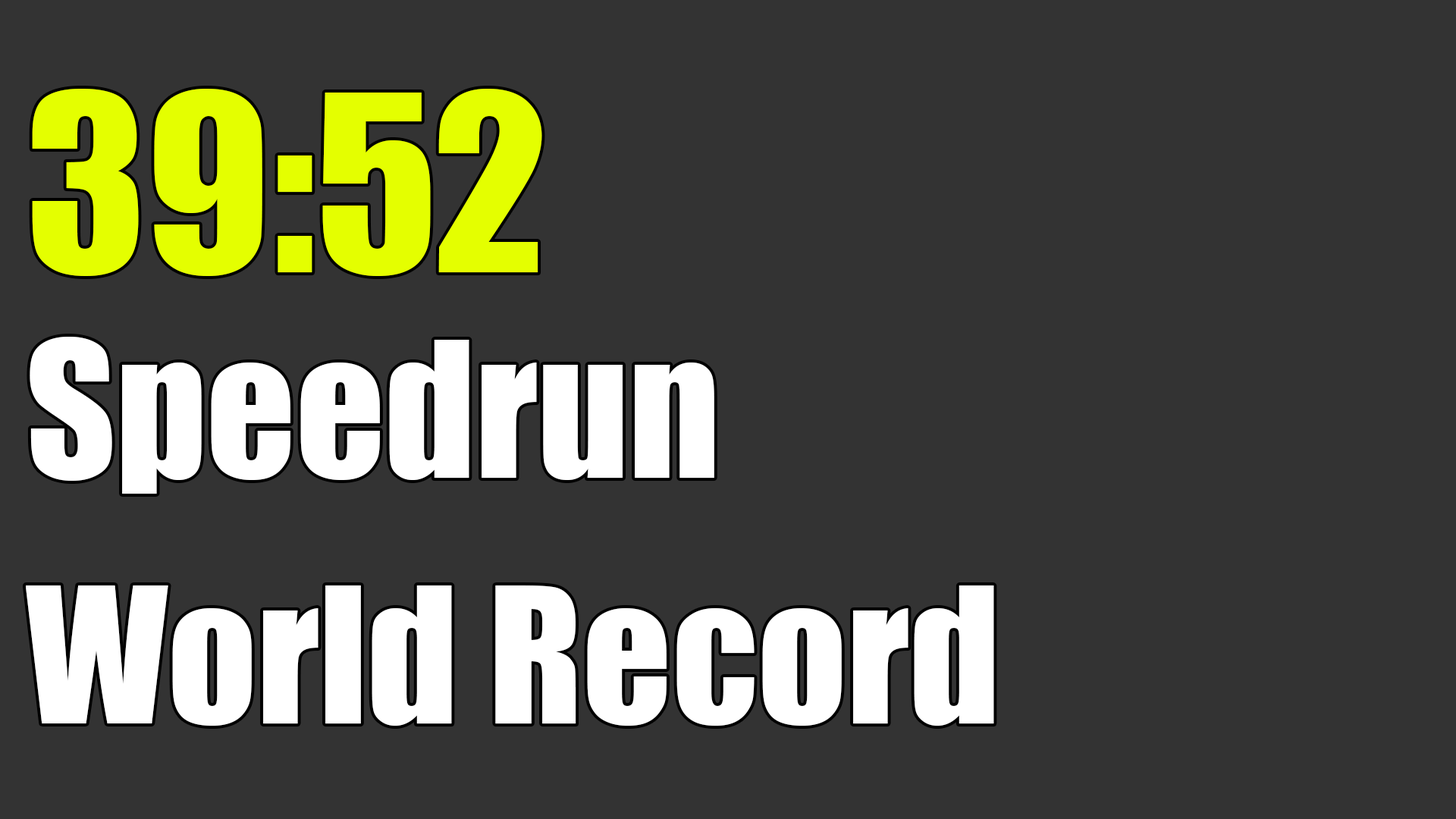
<style>
.page{position:relative;width:1456px;height:819px;background:#333333}
.page>*{position:absolute;margin:0}
.t1{font:227.5px "Impact";color:#e4ff00}
.t2{font:174.4px "Impact";color:#ffffff}
</style>
<div class="page">
<p class="t1" style="left:32px;top:89px;width:510px;height:187px">39:52</p>
<p class="t2" style="left:30px;top:337px;width:684px;height:157px">Speedrun</p>
<p class="t2" style="left:26px;top:585px;width:968px;height:141px">World Record</p>
</div>
